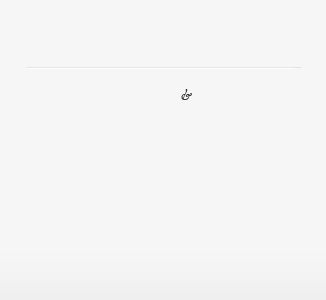
<style>
.page{position:relative;width:326px;height:300px;background:#f6f6f6}
.page>*{position:absolute;margin:0}
.t1{font:14px "HoeflerText-Italic";letter-spacing:0.025em;color:#333333}
</style>
<div class="page">
<p class="t1" style="left:181px;top:89px;width:11px;height:11px">&amp;</p>
</div>
